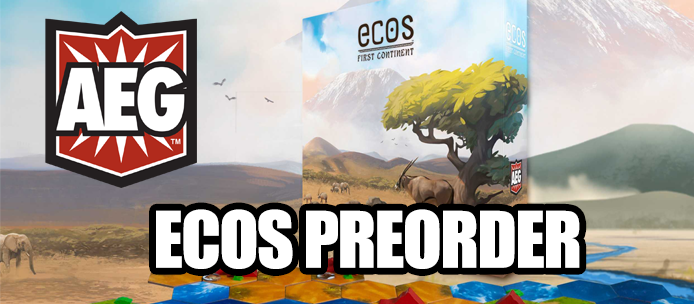
<style>
.page{position:relative;width:694px;height:304px}
.page>*{position:absolute;margin:0}
.t1{font:72px "Impact";letter-spacing:-0.025em;color:#ffffff}
</style>
<div class="page">
<p class="t1" style="left:156px;top:209px;width:424px;height:60px">ECOS PREORDER</p>
</div>
